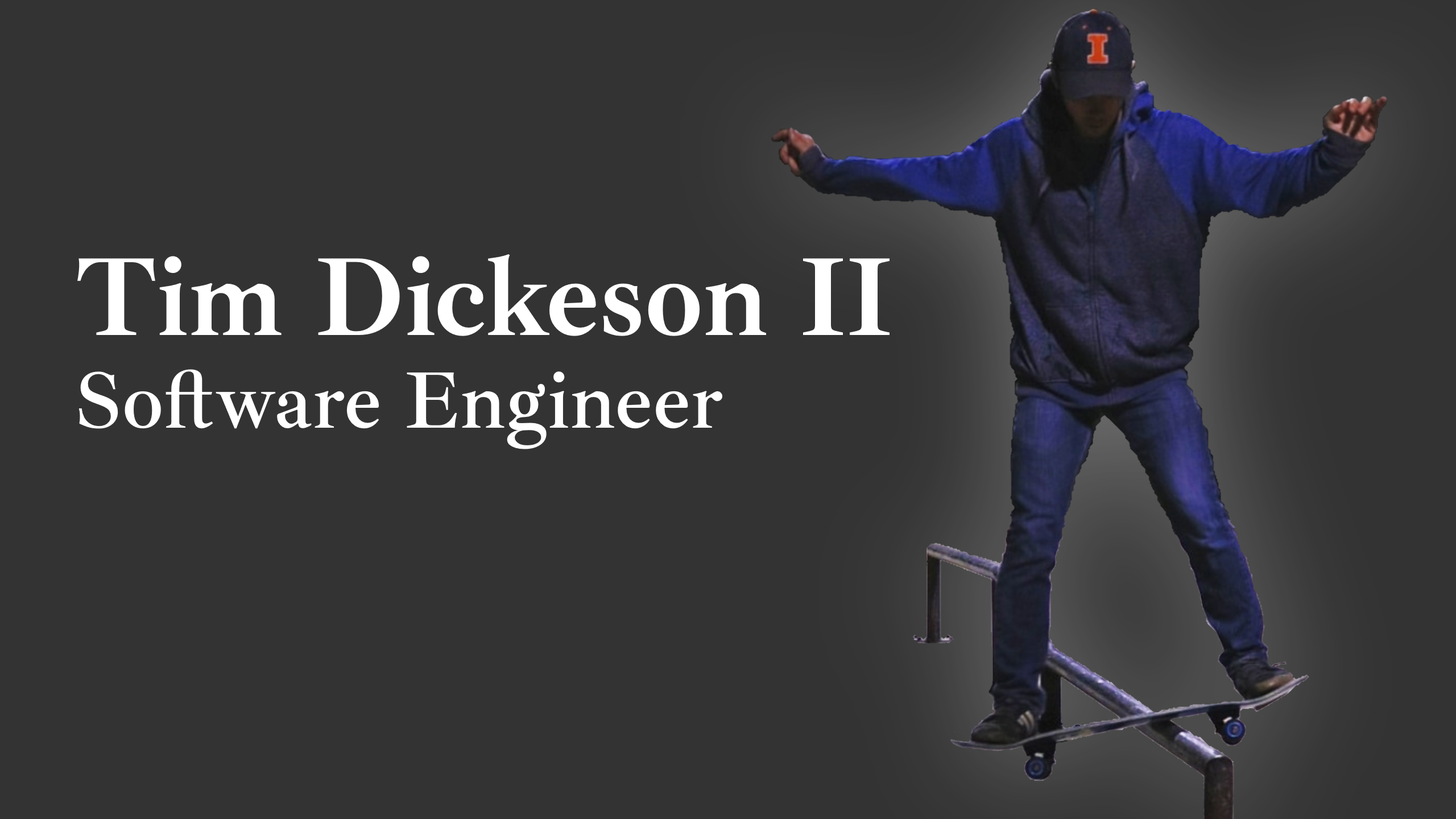
<style>
.page{position:relative;width:1456px;height:819px;background:#333333}
.page>*{position:absolute;margin:0}
.t1{font:113.7px "IbarraRealNova-Bold";color:#ffffff}
.t2{font:82px "IbarraRealNova-SemiBold";color:#ffffff}
</style>
<div class="page">
<p class="t1" style="left:77px;top:254px;width:813px;height:82px">Tim Dickeson II</p>
<p class="t2" style="left:78px;top:369px;width:645px;height:80px">Software Engineer</p>
</div>
